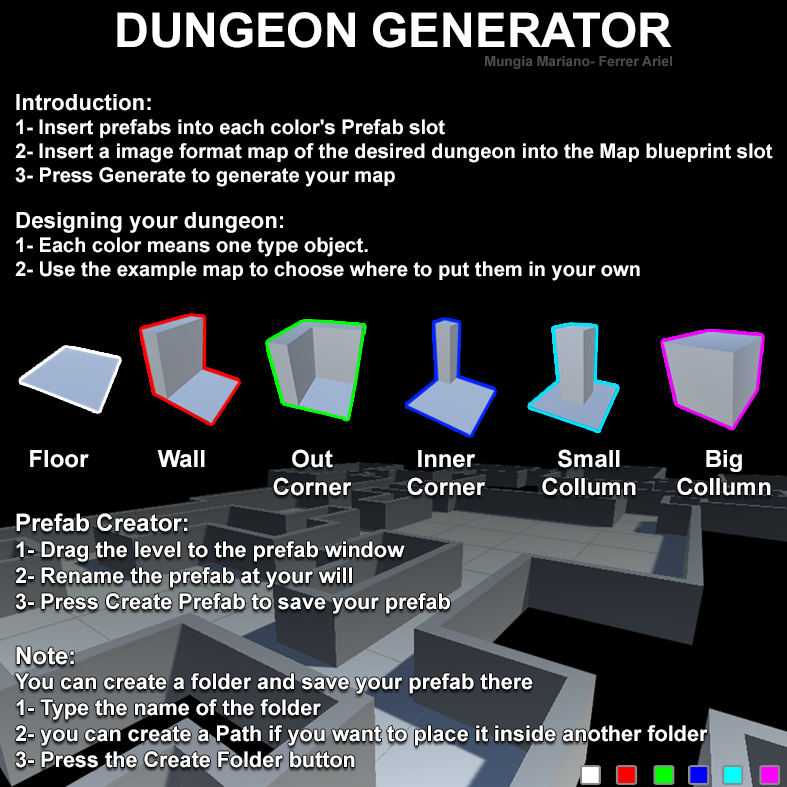
<style>
.page{position:relative;width:787px;height:787px;background:#000000}
.page>*{position:absolute;margin:0}
.t1{font:47.8px "Arial-BoldMT";color:#ffffff}
.t2{font:13.9px "Arial-BoldMT";color:#4b4b4b}
.t3{font:20.1px "Arial-BoldMT";color:#ffffff}
.t4{font:22.3px "Arial-BoldMT";color:#ffffff}
.t5{font:23.9px "Arial-BoldMT";color:#ffffff}
.t6{font:21.6px "Arial-BoldMT";color:#ffffff}
.t7{font:24px "Arial-BoldMT";color:#ffffff}
</style>
<div class="page">
<p class="t1" style="left:117px;top:12px;width:555px;height:36px">DUNGEON GENERATOR</p>
<p class="t2" style="left:485px;top:56px;width:187px;height:13px">Mungia Mariano- Ferrer Ariel</p>
<p class="t3" style="left:15px;top:94px;width:758px;height:93px"><span class="t4">Introduction:<br></span>1- Insert prefabs into each color's Prefab slot<br>2- Insert a image format map of the desired dungeon into the Map blueprint slot<br>3- Press Generate to generate your map</p>
<p class="t3" style="left:15px;top:212px;width:625px;height:69px"><span class="t4">Designing your dungeon:<br></span>1- Each color means one type object. <br>2- Use the example map to choose where to put them in your own</p>
<p class="t5" style="left:273px;top:449px;width:79px;height:47px;text-align:center">Out<br>Corner</p>
<p class="t5" style="left:542px;top:449px;width:94px;height:47px;text-align:center">Small<br>Collumn</p>
<p class="t5" style="left:30px;top:450px;width:59px;height:18px">Floor</p>
<p class="t5" style="left:157px;top:450px;width:48px;height:18px">Wall</p>
<p class="t5" style="left:407px;top:450px;width:78px;height:46px;text-align:center">Inner<br>Corner</p>
<p class="t5" style="left:677px;top:450px;width:94px;height:46px;text-align:center">Big<br>Collumn</p>
<p class="t6" style="left:15px;top:513px;width:693px;height:255px"><span class="t7">Prefab Creator:<br></span>1- Drag the level to the prefab window<br>2- Rename the prefab at your will<br>3- Press Create Prefab to save your prefab<br><br><span class="t7">Note:<br></span>You can create a folder and save your prefab there<br>1- Type the name of the folder<br>2- you can create a Path if you want to place it inside another folder<br>3- Press the Create Folder button</p>
</div>
